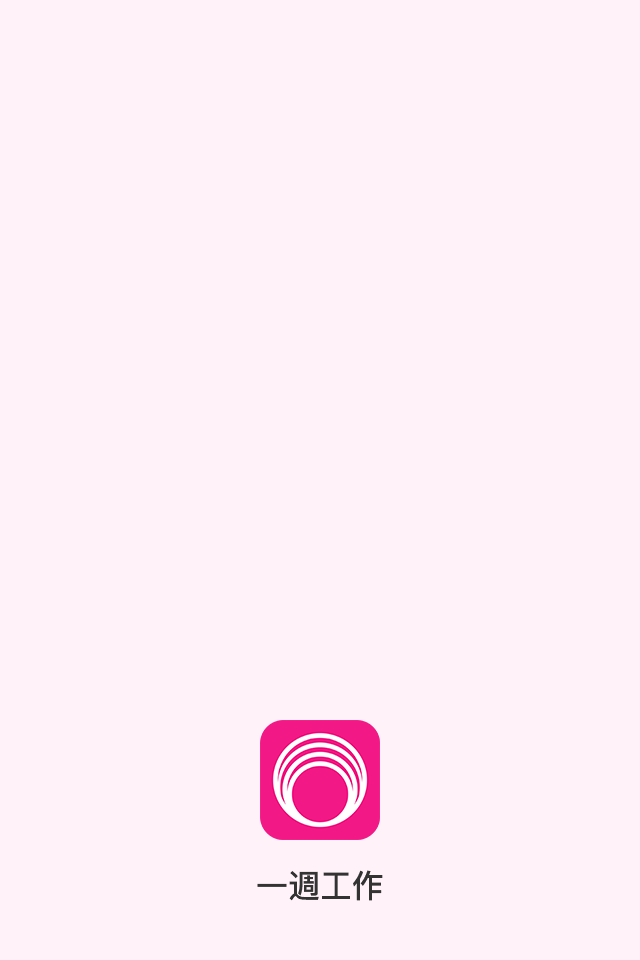
<style>
.page{position:relative;width:640px;height:960px;background:#fff2f9}
.page>*{position:absolute;margin:0}
.t1{font:32px "PingFang-SC-Bold";color:#333333}
</style>
<div class="page">
<p class="t1" style="left:257px;top:870px;width:126px;height:31px">一週工作</p>
</div>
